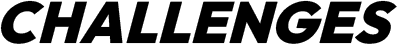
<style>
.page{position:relative;width:398px;height:44px;background:#000000}
.page>*{position:absolute;margin:0}
.t1{font:60px "Outfit-Black";color:#000000;font-style:italic;scale:0.97 1}
</style>
<div class="page">
<p class="t1" style="left:0px;top:0px;width:397px;height:44px">CHALLENGES</p>
</div>
